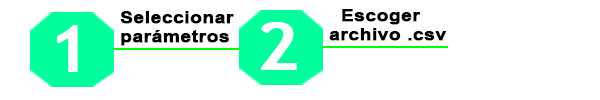
<style>
.page{position:relative;width:600px;height:100px;background:#ffffff}
.page>*{position:absolute;margin:0}
.t1{font:15.6px "Arial-BoldMT";color:#000000;font-weight:bold;scale:1.23 1}
.t2{font:64.5px "TrebuchetMS";color:#ffffff;font-weight:bold;scale:1.16 1}
</style>
<div class="page">
<p class="t1" style="left:120px;top:11px;width:114px;height:35px">Seleccionar<br>parámetros</p>
<p class="t1" style="left:329px;top:9px;width:117px;height:32px">Escoger<br>archivo .csv</p>
<p class="t2" style="left:57px;top:25px;width:21px;height:47px">1</p>
<p class="t2" style="left:261px;top:22px;width:36px;height:48px">2</p>
</div>
